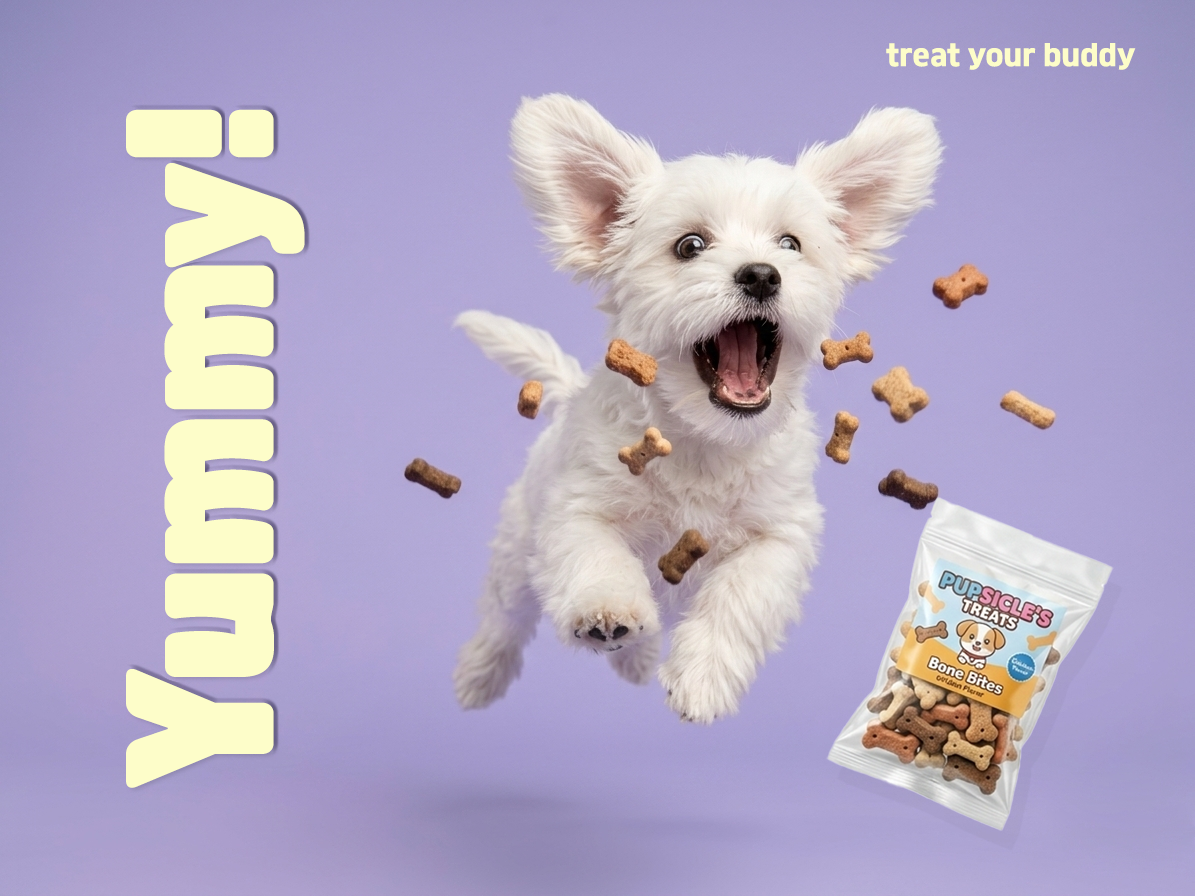
<style>
.page{position:relative;width:1195px;height:896px}
.page>*{position:absolute;margin:0}
.t1{font:27.2px "JalnanGothic";color:#fdfdc9}
.t2{font:165.8px "RixInooAriDuriPR";color:#fdfdc9}
</style>
<div class="page">
<p class="t1" style="left:886px;top:43px;width:250px;height:27px">treat your buddy</p>
<p class="t2" style="left:126px;top:109px;width:179px;height:679px;rotate:-90deg">Yummy!</p>
</div>
